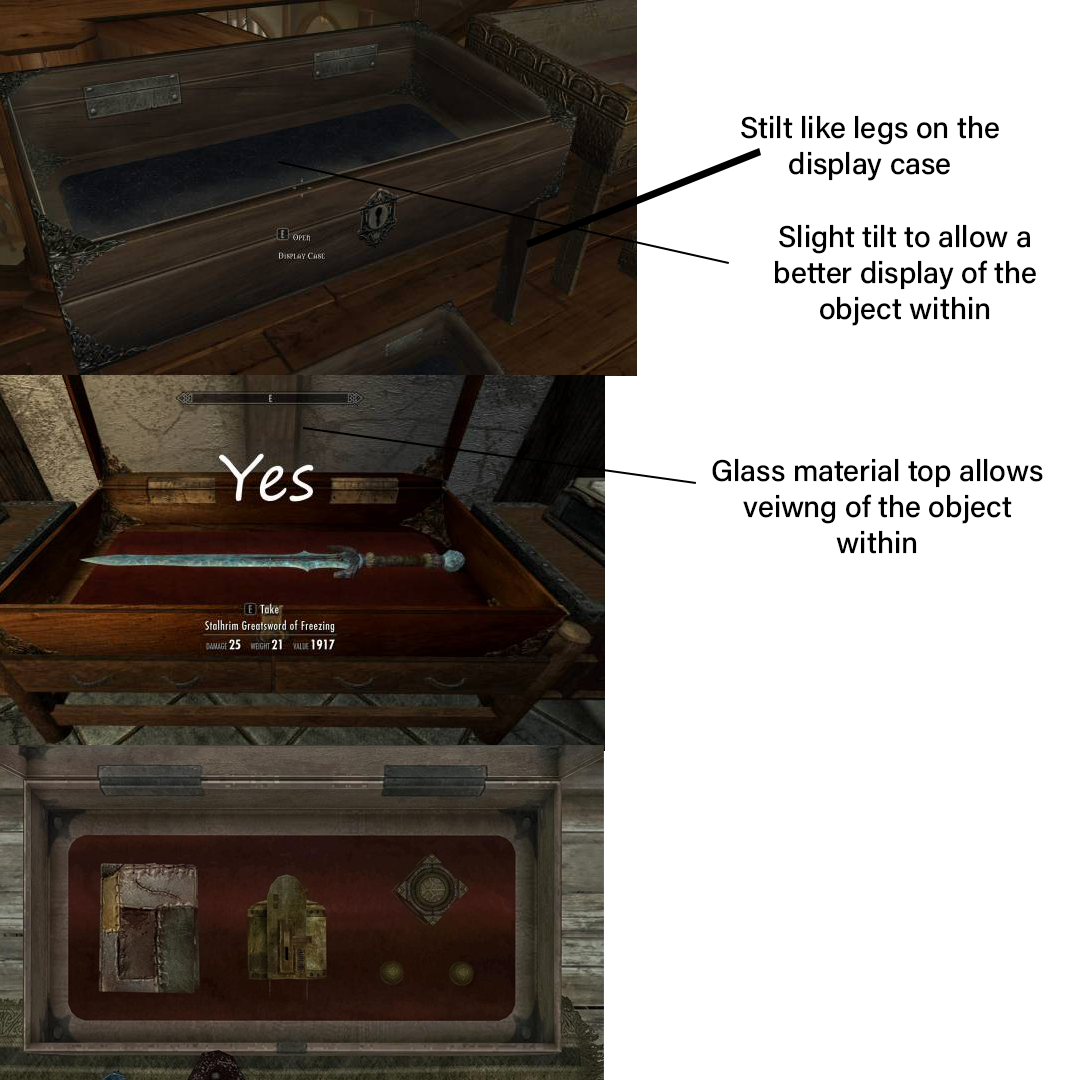
<style>
.page{position:relative;width:1080px;height:1080px;background:#ffffff}
.page>*{position:absolute;margin:0}
.t1{font:30px "AcuminConcept-Medium";color:#000000}
</style>
<div class="page">
<p class="t1" style="left:741px;top:115px;width:258px;height:66px;text-align:center">Stilt like legs on the display case</p>
<p class="t1" style="left:775px;top:224px;width:261px;height:102px;text-align:center">Slight tilt to allow a better display of the object within</p>
<p class="t1" style="left:712px;top:458px;width:331px;height:96px;text-align:center">Glass material top allows veiwng of the object within</p>
</div>
